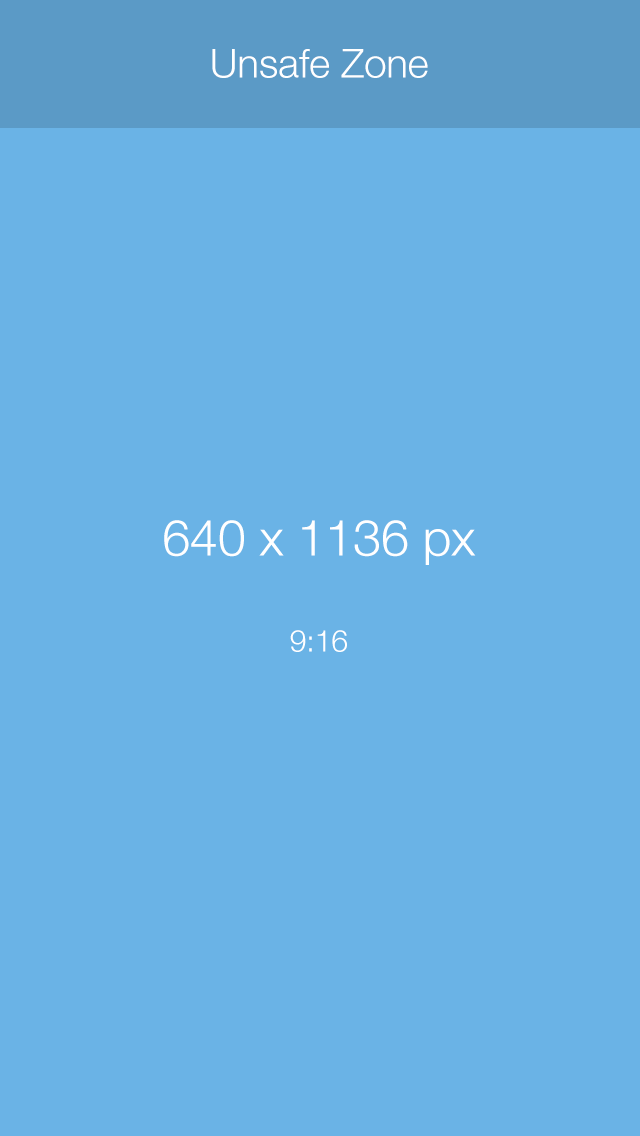
<style>
.page{position:relative;width:640px;height:1136px;background:#6ab3e6}
.page>*{position:absolute;margin:0}
.t1{font:40px "HelveticaNeue-Light";color:#ffffff}
.t2{font:50px "HelveticaNeue-Light";color:#ffffff}
.t3{font:30px "HelveticaNeue-Light";color:#ffffff}
</style>
<div class="page">
<p class="t1" style="left:212px;top:49px;width:216px;height:29px">Unsafe Zone</p>
<p class="t2" style="left:164px;top:520px;width:312px;height:132px;text-align:center">640 x 1136 px<br><br><span class="t3">9:16</span></p>
</div>
